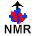
<style>
.page{position:relative;width:36px;height:36px;background:#ffffff}
.page>*{position:absolute;margin:0}
.t1{font:12px "Arial-BoldMT";color:#000000}
</style>
<div class="page">
<p class="t1" style="left:4px;top:24px;width:28px;height:10px">NMR</p>
</div>
